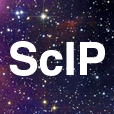
<style>
.page{position:relative;width:114px;height:114px}
.page>*{position:absolute;margin:0}
.t1{font:45.6px "Helvetica-Bold";color:#ffffff}
</style>
<div class="page">
<p class="t1" style="left:9px;top:41px;width:96px;height:35px">ScIP</p>
</div>
